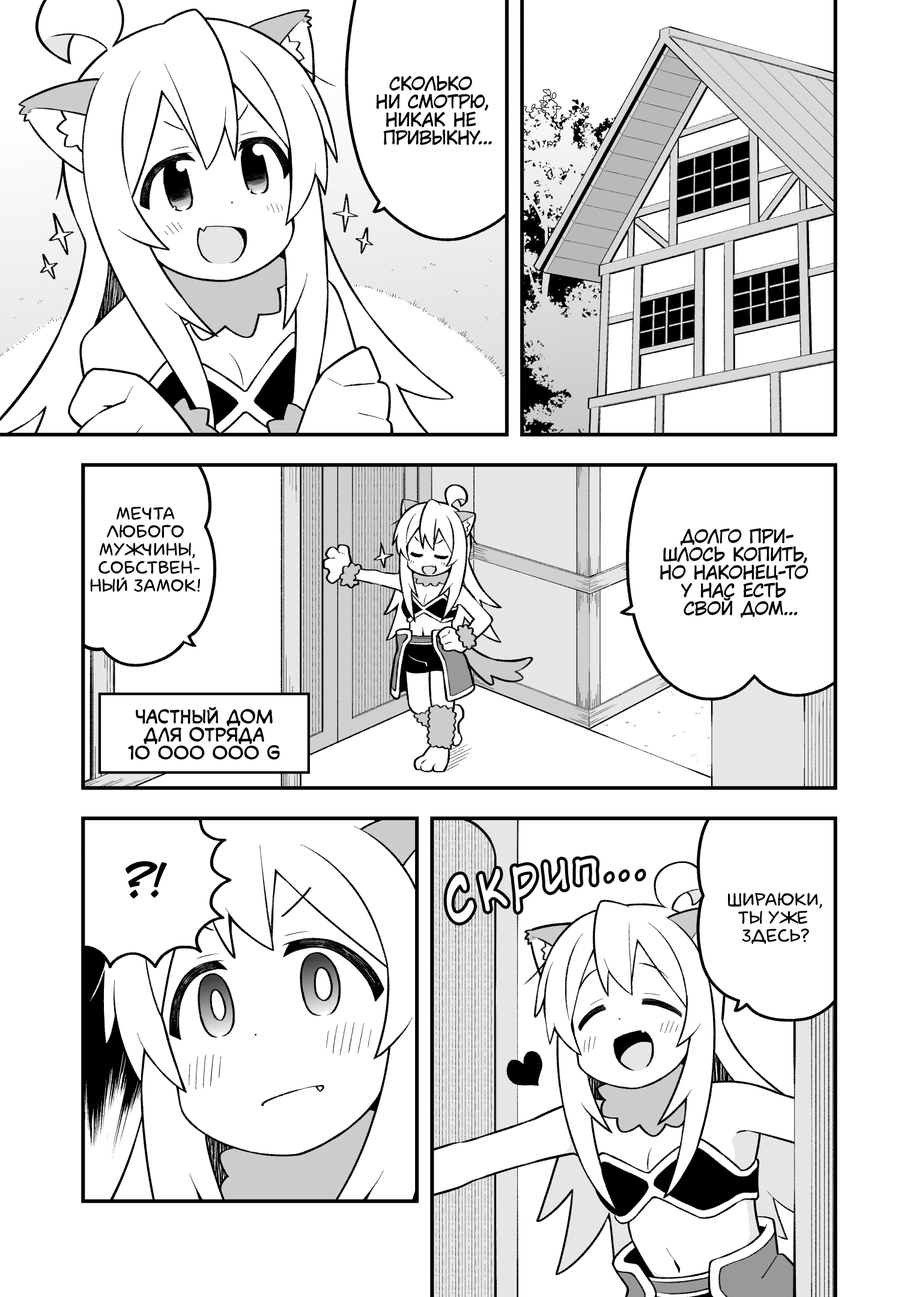
<style>
.page{position:relative;width:919px;height:1297px;background:#ffffff}
.page>*{position:absolute;margin:0}
.t1{font:18px "KuraiVoice2";color:#000000;text-transform:uppercase}
.t2{font:18px "laCartoonerie";color:#000000;text-transform:uppercase}
.t3{font:18px "v_CCMonologous";color:#000000;text-transform:uppercase}
.t4{font:43.2px "v_CCJeffCampbell";color:#000000;text-transform:uppercase}
.t5{font:59.5px "KuraiVoice2";color:#ffffff;scale:0.77 1}
.t6{font:52.3px "KuraiVoice2";color:#ffffff;scale:0.85 1}
.t7{font:47px "KuraiVoice2";color:#ffffff;scale:0.94 1}
.t8{font:40.4px "KuraiVoice2";color:#ffffff;scale:1.06 1}
.t9{font:72.1px "KuraiVoice2";color:#ffffff;scale:0.71 1}
.t10{font:36px "KuraiVoice2";color:#ffffff;scale:0.85 1}
</style>
<div class="page">
<p class="t1" style="left:376px;top:75px;width:116px;height:70px;text-align:center">Сколько<br>ни смотрю,<br>никак не<br>привыкну...</p>
<p class="t2" style="left:90px;top:507px;width:110px;height:85px;text-align:center">Мечта<br>любого<br>мужчины,<br>собствен-<br>ный замок!</p>
<p class="t1" style="left:660px;top:528px;width:149px;height:90px;text-align:center">Долго при-<br>шлось копить,<br>но наконец-то<br>у нас есть<br>свой дом...</p>
<p class="t3" style="left:128px;top:707px;width:152px;height:53px;text-align:center">Частный дом<br>для отряда<br>10 000 000 G</p>
<p class="t4" style="left:125px;top:861px;width:42px;height:38px">?!</p>
<p class="t5" style="left:479px;top:869px;width:29px;height:43px;rotate:-13deg">к</p>
<p class="t6" style="left:512px;top:866px;width:24px;height:46px;rotate:-7deg">р</p>
<p class="t7" style="left:543px;top:860px;width:24px;height:33px;rotate:-5deg">и</p>
<p class="t8" style="left:575px;top:858px;width:21px;height:27px">п</p>
<p class="t9" style="left:446px;top:875px;width:28px;height:48px;rotate:-17deg">с</p>
<p class="t10" style="left:606px;top:874px;width:6px;height:7px">.</p>
<p class="t10" style="left:621px;top:872px;width:6px;height:7px">.</p>
<p class="t10" style="left:637px;top:872px;width:6px;height:7px">.</p>
<p class="t2" style="left:728px;top:893px;width:94px;height:51px;text-align:center">Шираюки,<br>ты уже<br> здесь?</p>
</div>
